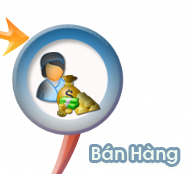
<style>
.page{position:relative;width:195px;height:174px;background:#ffffff}
.page>*{position:absolute;margin:0}
.t1{font:18px "VNI-Avo-Bold";color:#eef9ef}
</style>
<div class="page">
<p class="t1" style="left:92px;top:146px;width:86px;height:18px">Baùn Haøng</p>
</div>
